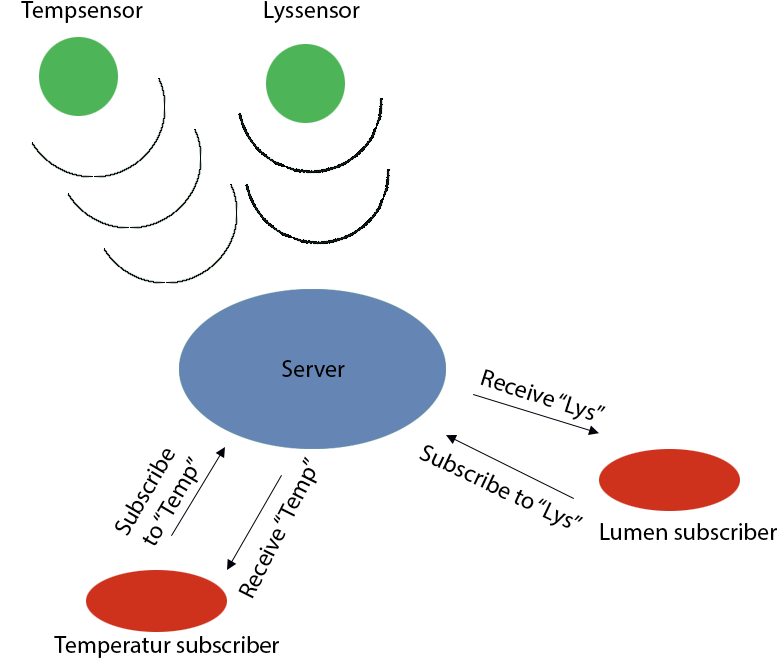
<style>
.page{position:relative;width:778px;height:658px;background:#ffffff}
.page>*{position:absolute;margin:0}
.t1{font:12px "MyriadPro-Regular";color:#000000}
</style>
<div class="page">
<p class="t1" style="left:21px;top:1px;width:122px;height:22px">Tempsensor</p>
<p class="t1" style="left:264px;top:1px;width:96px;height:22px">Lyssensor</p>
<p class="t1" style="left:282px;top:360px;width:63px;height:17px">Server</p>
<p class="t1" style="left:480px;top:369px;width:126px;height:51px;rotate:18deg">Receive “Lys”</p>
<p class="t1" style="left:115px;top:449px;width:83px;height:97px;rotate:-60deg">Subscribe<br> to “Temp”</p>
<p class="t1" style="left:419px;top:445px;width:165px;height:83px;rotate:25deg">Subscribe to “Lys”</p>
<p class="t1" style="left:238px;top:456px;width:79px;height:143px;rotate:-63deg">Receive “Temp”</p>
<p class="t1" style="left:600px;top:523px;width:177px;height:17px">Lumen subscriber</p>
<p class="t1" style="left:54px;top:636px;width:225px;height:22px">Temperatur subscriber</p>
</div>
